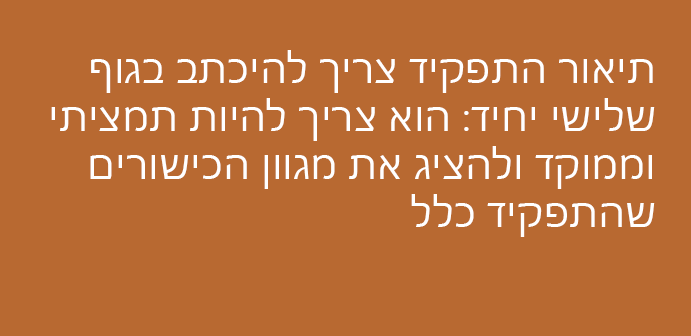
<style>
.page{position:relative;width:691px;height:336px;background:#b86931}
.page>*{position:absolute;margin:0}
.t1{font:40px "SegoeUI";color:#ffffff}
</style>
<div class="page">
<p class="t1" style="left:51px;top:50px;width:604px;height:187px;text-align:right">תיאור התפקיד צריך להיכתב בגוף שלישי יחיד: הוא צריך להיות תמציתי וממוקד ולהציג את מגוון הכישורים שהתפקיד כלל</p>
</div>
